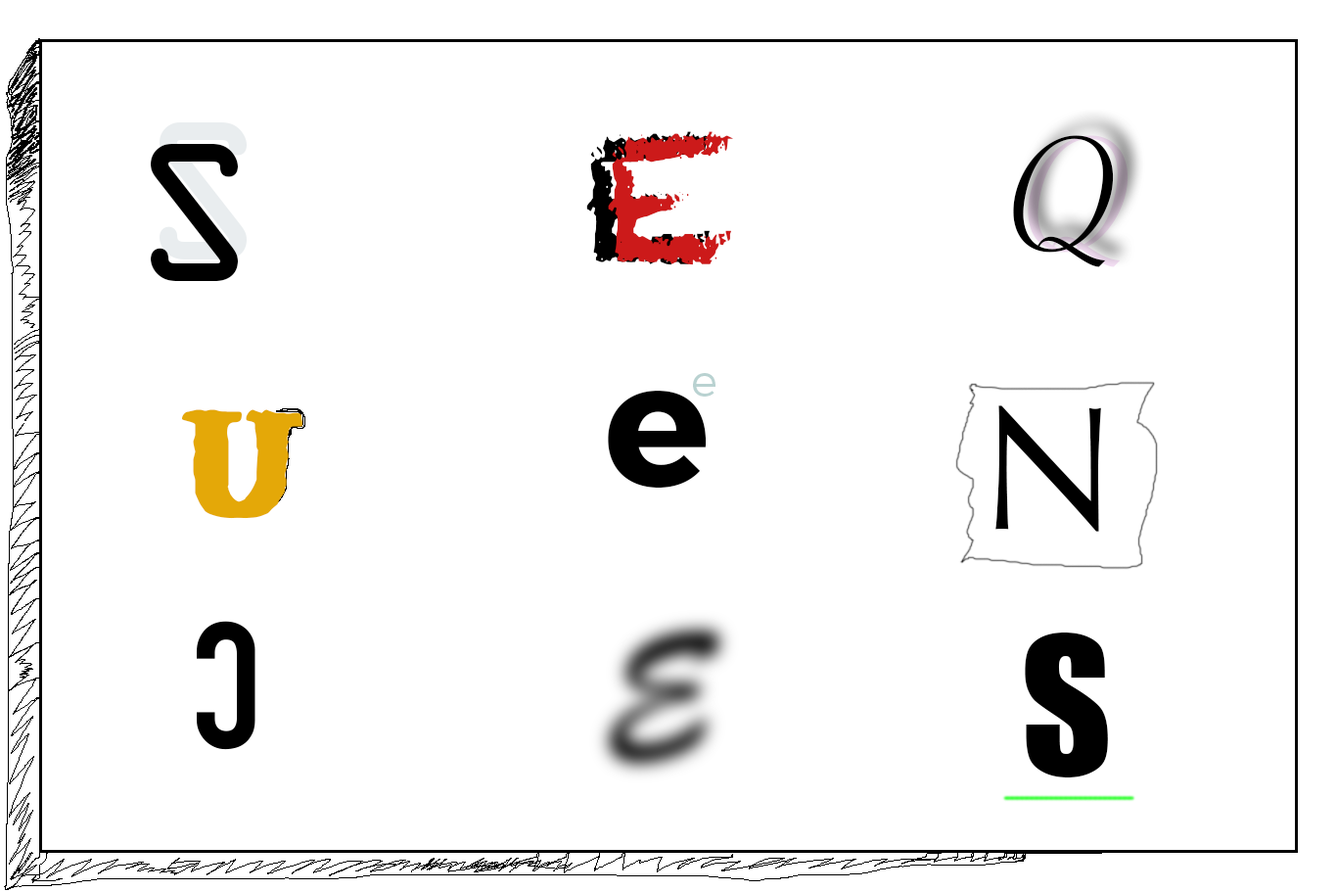
<style>
.page{position:relative;width:1337px;height:892px;background:#ffffff}
.page>*{position:absolute;margin:0}
.t1{font:176.2px "Chalkduster"}
.t2{font:176.2px "Chalkduster";color:#cc1a1a}
.t3{font:176.2px "SavoyeLetPlain";color:#000000}
.t4{font:176.2px "OCRAStd";color:#000000}
.t5{font:44px "TruenoLt";color:#b9d2d1}
.t6{font:176.2px "TruenoBd";color:#000000}
.t7{font:176.2px "Trattatello";color:#e4a808}
.t8{font:176.2px "Optima-Regular";color:#000000}
.t9{font:176.2px "Impact";color:#000000}
</style>
<div class="page">
<p class="t1" style="left:586px;top:131px;width:126px;height:134px">E</p>
<p class="t2" style="left:608px;top:131px;width:125px;height:134px">E</p>
<p class="t3" style="left:1013px;top:135px;width:101px;height:132px">Q</p>
<p class="t4" style="left:151px;top:144px;width:87px;height:137px">S</p>
<p class="t5" style="left:693px;top:373px;width:23px;height:23px">e</p>
<p class="t6" style="left:608px;top:391px;width:99px;height:96px">e</p>
<p class="t7" style="left:181px;top:409px;width:108px;height:110px">U</p>
<p class="t7" style="left:195px;top:409px;width:107px;height:110px">U</p>
<p class="t8" style="left:996px;top:405px;width:105px;height:127px">N</p>
<p class="t9" style="left:1025px;top:632px;width:83px;height:145px">S</p>
</div>
